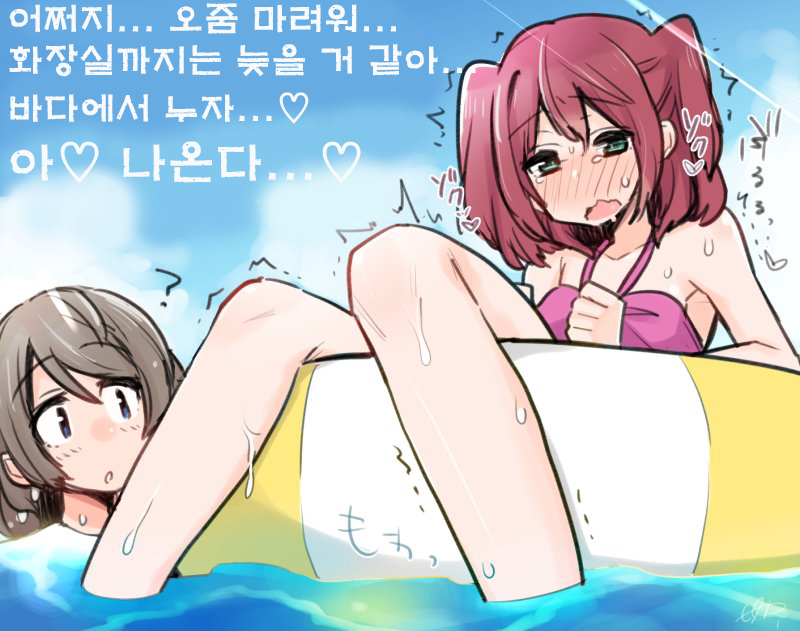
<style>
.page{position:relative;width:800px;height:631px}
.page>*{position:absolute;margin:0}
.t1{font:36px "H2mkpB";color:#f7f9fa}
.t2{font:48px "H2mkpB";color:#f7f9fa}
</style>
<div class="page">
<p class="t1" style="left:9px;top:3px;width:388px;height:31px">어쩌지... 오줌 마려워...</p>
<p class="t1" style="left:9px;top:44px;width:467px;height:33px">화장실까지는 늦을 거 같아...</p>
<p class="t1" style="left:10px;top:92px;width:299px;height:32px">바다에서 누자...♡</p>
<p class="t2" style="left:10px;top:141px;width:351px;height:42px">아♡ 나온다...♡</p>
</div>
